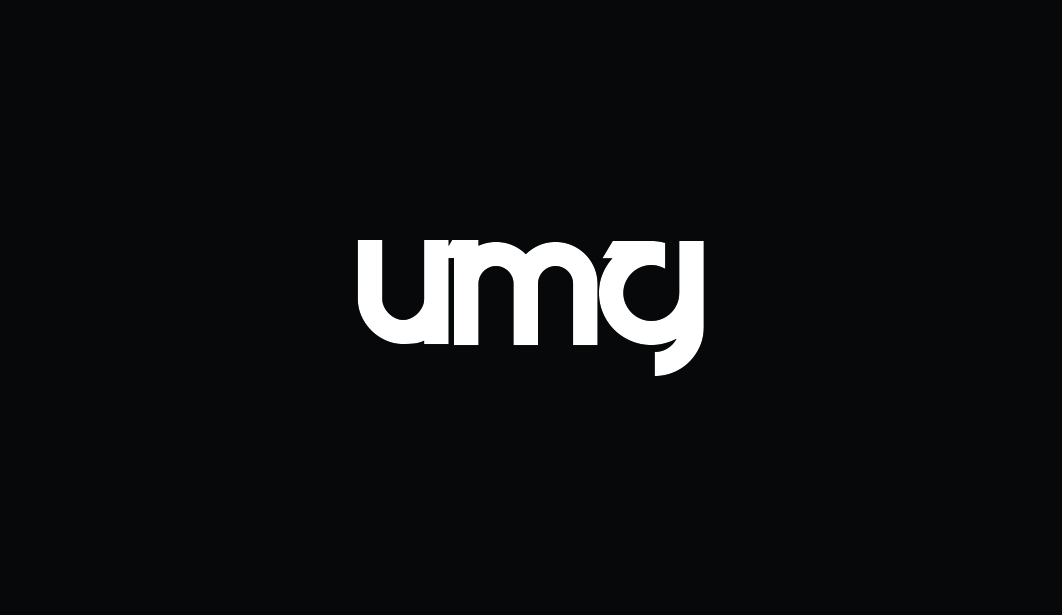
<style>
.page{position:relative;width:1062px;height:615px;background:#070809}
.page>*{position:absolute;margin:0}
.t1{font:150px "Velocity";color:#ffffff}
</style>
<div class="page">
<p class="t1" style="left:357px;top:240px;width:347px;height:136px">umg</p>
</div>
